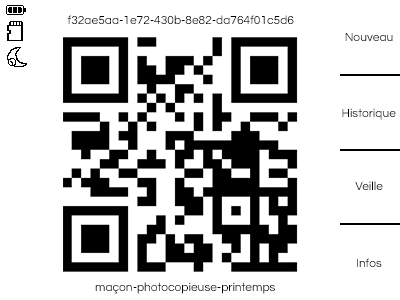
<style>
.page{position:relative;width:400px;height:300px;background:#ffffff}
.page>*{position:absolute;margin:0}
.t1{font:12px "Questrial-Regular";color:#000000}
.t2{font:12px "Questrial-Regular"}
</style>
<div class="page">
<p class="t1" style="left:67px;top:15px;width:227px;height:9px">f32ae5aa-1e72-430b-8e82-da764f01c5d6</p>
<p class="t2" style="left:345px;top:33px;width:48px;height:8px">Nouveau</p>
<p class="t1" style="left:342px;top:108px;width:54px;height:12px">Historique</p>
<p class="t1" style="left:355px;top:181px;width:28px;height:9px">Veille</p>
<p class="t2" style="left:357px;top:258px;width:25px;height:9px">Infos</p>
<p class="t1" style="left:95px;top:282px;width:180px;height:12px">maçon-photocopieuse-printemps</p>
</div>
